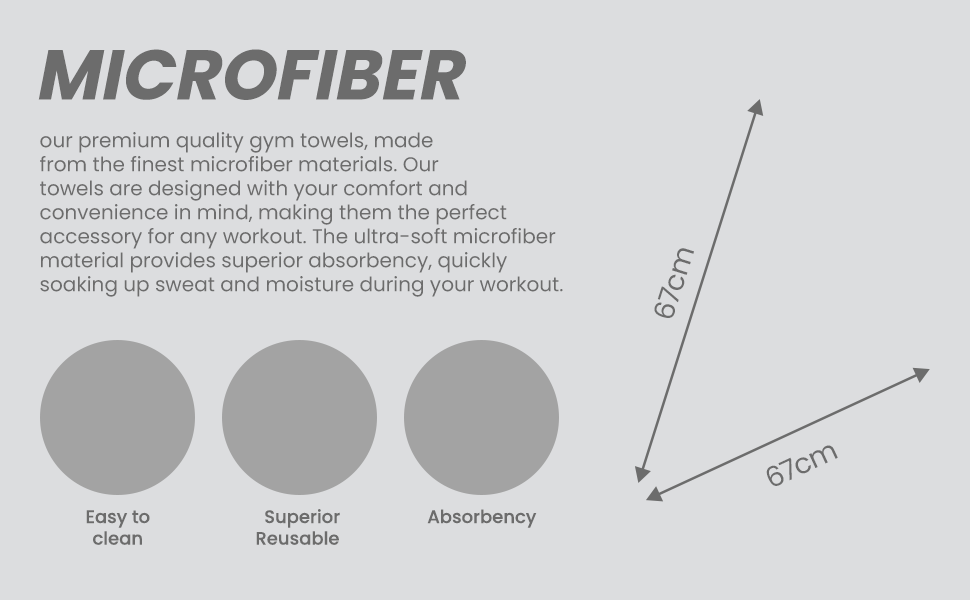
<style>
.page{position:relative;width:970px;height:600px;background:#dcdddf}
.page>*{position:absolute;margin:0}
.t1{font:70px "Poppins-Bold";color:#6c6c6c;text-transform:uppercase;font-style:italic}
.t2{font:20px "Poppins-Regular";color:#6c6c6c}
.t3{font:28px "Poppins-Regular";color:#6c6c6c}
.t4{font:18px "Poppins-Medium";color:#6c6c6c}
</style>
<div class="page">
<p class="t1" style="left:38px;top:49px;width:428px;height:51px">MICROFIBER</p>
<p class="t2" style="left:40px;top:132px;width:523px;height:165px">our premium quality gym towels, made<br>from the finest microfiber materials. Our <br>towels are designed with your comfort and<br>convenience in mind, making them the perfect <br>accessory for any workout. The ultra-soft microfiber<br>material provides superior absorbency, quickly<br>soaking up sweat and moisture during your workout.</p>
<p class="t3" style="left:654px;top:248px;width:40px;height:70px;rotate:-72deg">67cm</p>
<p class="t3" style="left:766px;top:445px;width:72px;height:41px;rotate:-25deg">67cm</p>
<p class="t4" style="left:86px;top:510px;width:64px;height:35px;text-align:center">Easy to<br>clean</p>
<p class="t4" style="left:256px;top:509px;width:84px;height:36px;text-align:center">Superior<br>Reusable</p>
<p class="t4" style="left:427px;top:509px;width:110px;height:19px">Absorbency</p>
</div>
